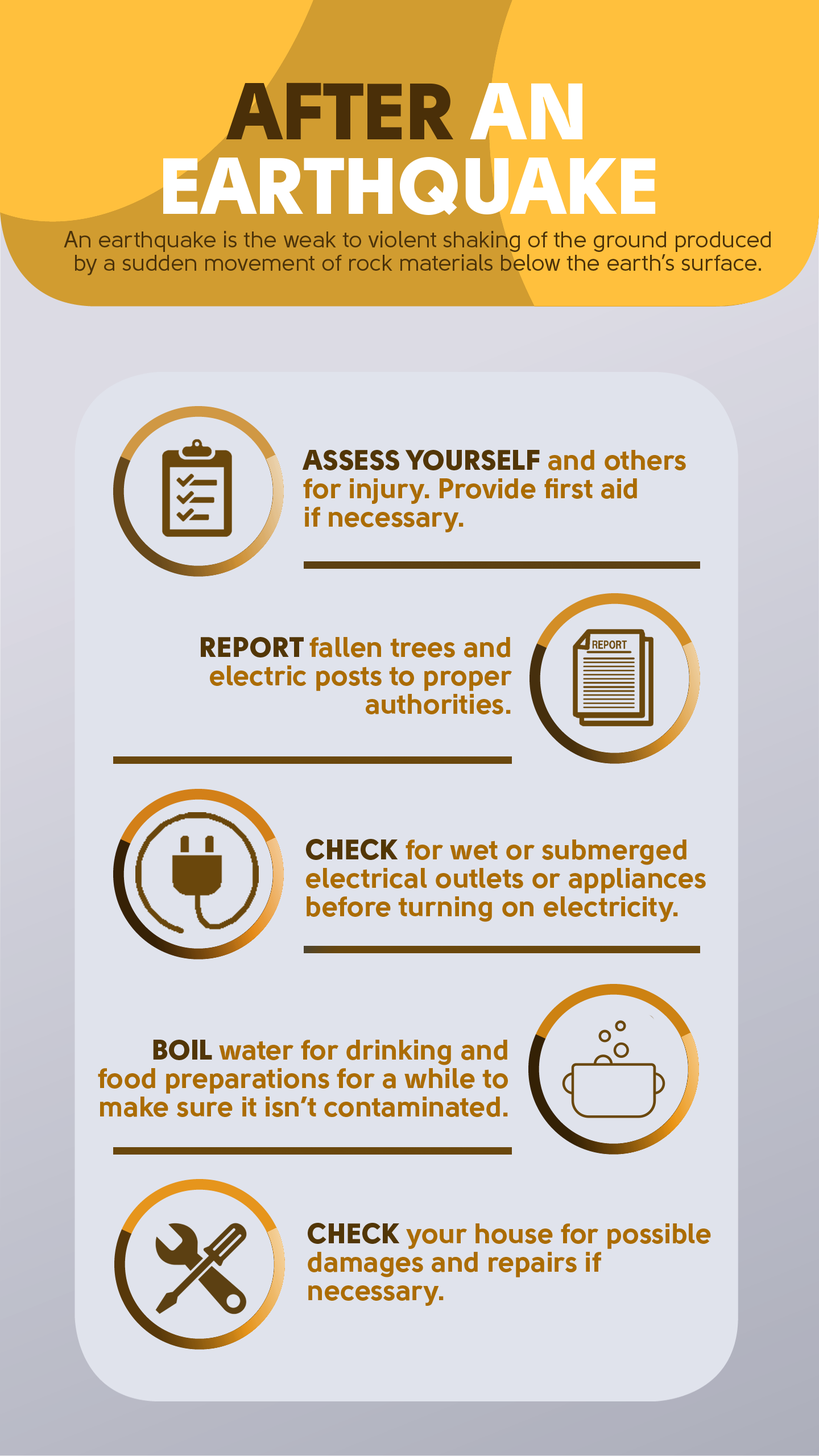
<style>
.page{position:relative;width:819px;height:1456px;background:#e0e3ec}
.page>*{position:absolute;margin:0}
.t1{font:79.6px/74.5px "Solomon-Sans-Black";color:#ffffff}
.t2{font:79.6px/74.5px "Solomon-Sans-Black";color:#4a2f08}
.t3{font:22.7px/23.3px "Solomon-Sans-Normal";color:#4c330a}
.t4{font:28.4px/28.4px "Solomon-Sans-Bold";color:#ab6c03}
.t5{font:28.4px/28.4px "Solomon-Sans-Black";color:#523606}
</style>
<div class="page">
<p class="t1" style="left:163px;top:82px;width:493px;height:133px;text-align:center"><span class="t2">AFTER</span> AN<br>EARTHQUAKE</p>
<p class="t3" style="left:64px;top:231px;width:707px;height:44px;text-align:center">An earthquake is the weak to violent shaking of the ground produced<br>by a sudden movement of rock materials below the earth’s surface.</p>
<p class="t4" style="left:302px;top:450px;width:384px;height:82px"><span class="t5">ASSESS YOURSELF </span>and others<br>for injury. Provide first aid<br>if necessary.</p>
<p class="t4" style="left:201px;top:637px;width:311px;height:77px;text-align:right"><span class="t5">REPORT </span>fallen trees and<br>electric posts to proper<br>authorities.</p>
<p class="t4" style="left:306px;top:839px;width:400px;height:83px"><span class="t5">CHECK </span>for wet or submerged<br>electrical outlets or appliances<br>before turning on electricity.</p>
<p class="t4" style="left:98px;top:1040px;width:410px;height:77px;text-align:right"><span class="t5">BOIL </span>water for drinking and<br>food preparations for a while to<br>make sure it isn’t contaminated.</p>
<p class="t4" style="left:308px;top:1223px;width:403px;height:83px"><span class="t5">CHECK </span>your house for possible<br>damages and repairs if<br>necessary.</p>
</div>
